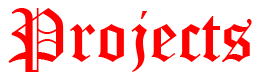
<style>
.page{position:relative;width:266px;height:76px;background:#ffffff}
.page>*{position:absolute;margin:0}
.t1{font:72px "OldEnglishTextMT";color:#ff0000}
</style>
<div class="page">
<p class="t1" style="left:8px;top:8px;width:244px;height:64px">Projects</p>
</div>
